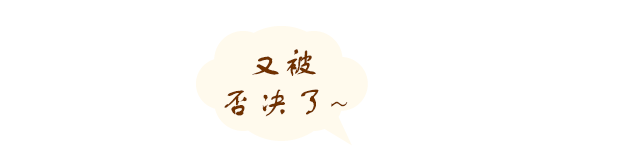
<style>
.page{position:relative;width:641px;height:152px;background:#ffffff}
.page>*{position:absolute;margin:0}
.t1{font:33px "FZSTK--GBK1-0";letter-spacing:0.1em;color:#703100}
.t2{font:30px "STXingkai";letter-spacing:0.1em;color:#703100;scale:0.6 1}
</style>
<div class="page">
<p class="t1" style="left:252px;top:49px;width:64px;height:27px"><span class="t2">  </span>又被</p>
<p class="t1" style="left:224px;top:89px;width:124px;height:28px">否决了~</p>
</div>
